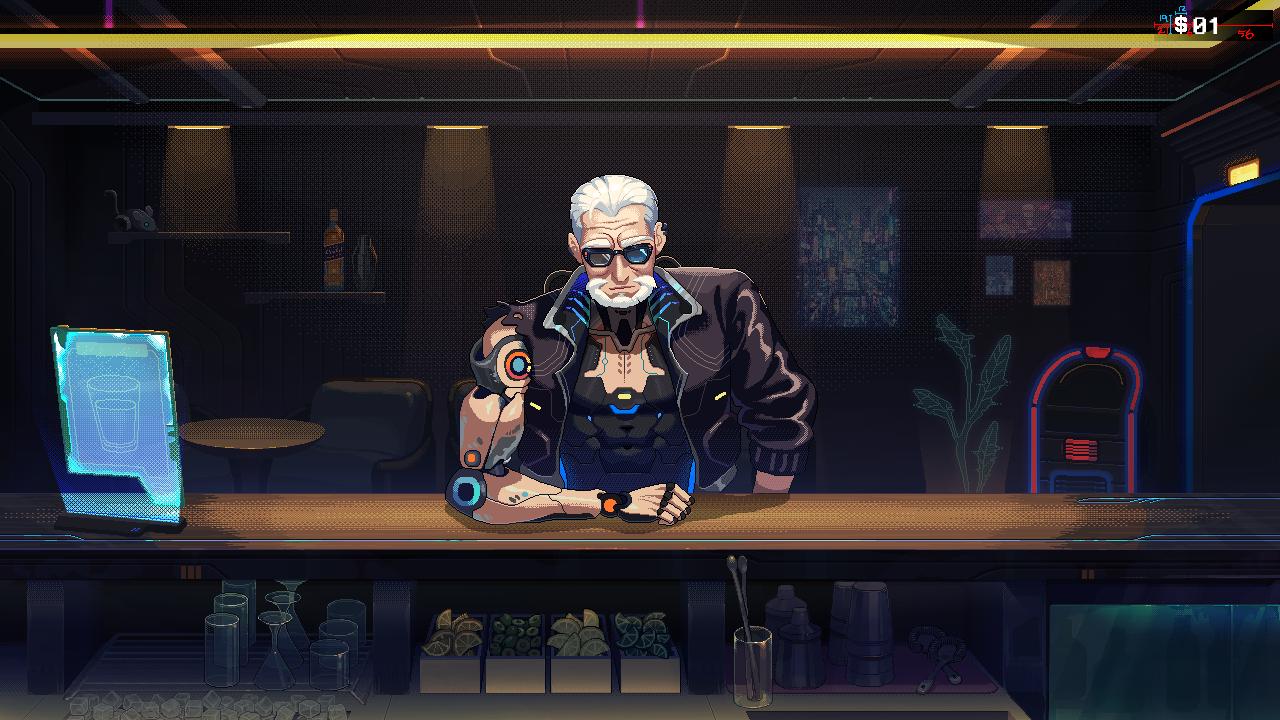
<style>
.page{position:relative;width:1280px;height:720px}
.page>*{position:absolute;margin:0}
.t1{font:26.5px "NeoDunggeunmo-Regular";color:#ffffff;scale:1.08 1}
</style>
<div class="page">
<p class="t1" style="left:1193px;top:17px;width:24px;height:17px">01</p>
</div>
